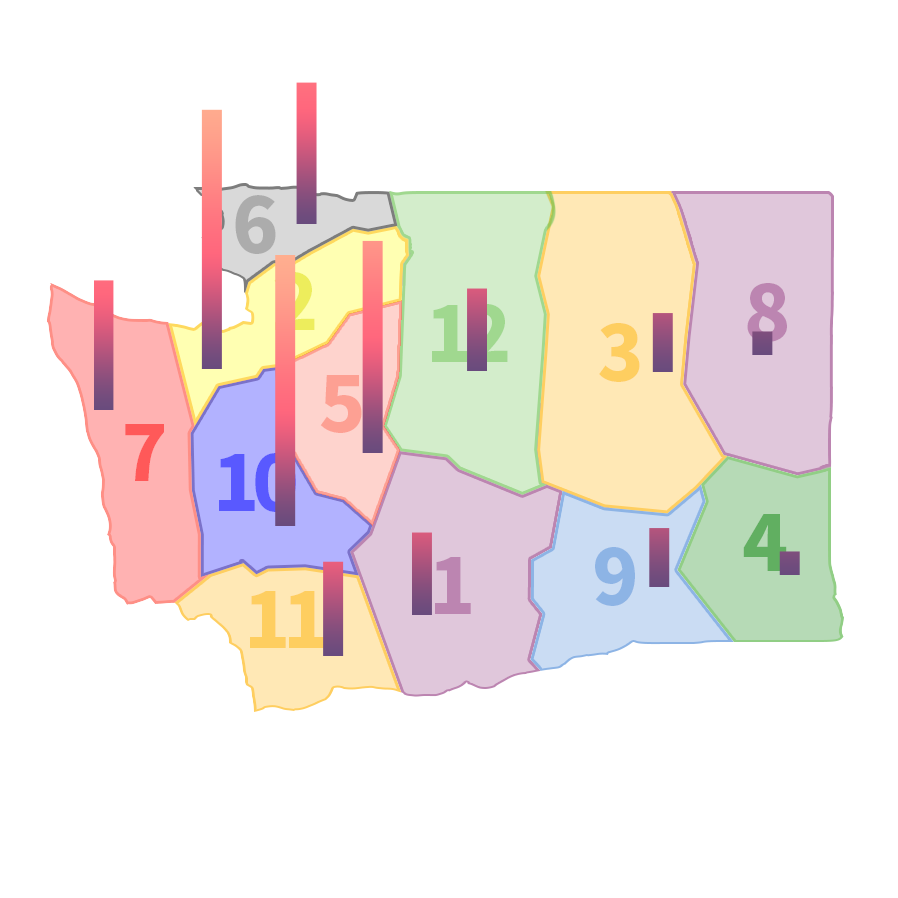
<style>
.page{position:relative;width:898px;height:898px;background:#ffffff}
.page>*{position:absolute;margin:0}
.t1{font:76.5px "SourceHanSansCN-Heavy";letter-spacing:0.05em;color:#acacac}
.t2{font:76.5px "SourceHanSansCN-Heavy";letter-spacing:0.05em}
.t3{font:76.5px "SourceHanSansCN-Heavy";letter-spacing:0.05em;color:#bc85b1}
.t4{font:76.5px "SourceHanSansCN-Heavy";letter-spacing:-0.1em;color:#a0d88f}
.t5{font:76.5px "SourceHanSansCN-Heavy";letter-spacing:0.05em;color:#fece60}
.t6{font:76.5px "SourceHanSansCN-Heavy";letter-spacing:0.05em;color:#fda093}
.t7{font:76.5px "SourceHanSansCN-Heavy";letter-spacing:0.05em;color:#ff5959}
.t8{font:76.5px "SourceHanSansCN-Heavy";letter-spacing:-0.1em;color:#5959ff}
.t9{font:76.5px "SourceHanSansCN-Heavy";letter-spacing:0.05em;color:#61af61}
.t10{font:76.5px "SourceHanSansCN-Heavy";letter-spacing:0.05em;color:#8db4e5}
.t11{font:76.5px "SourceHanSansCN-Heavy";letter-spacing:-0.1em;color:#fece60}
</style>
<div class="page">
<p class="t1" style="left:235px;top:195px;width:41px;height:59px">6</p>
<p class="t2" style="left:274px;top:272px;width:41px;height:58px">2</p>
<p class="t3" style="left:747px;top:283px;width:40px;height:59px">8</p>
<p class="t4" style="left:432px;top:304px;width:76px;height:58px">12</p>
<p class="t5" style="left:599px;top:323px;width:41px;height:59px">3</p>
<p class="t6" style="left:320px;top:375px;width:42px;height:58px">5</p>
<p class="t7" style="left:125px;top:424px;width:39px;height:57px">7</p>
<p class="t8" style="left:219px;top:453px;width:77px;height:59px">10</p>
<p class="t9" style="left:743px;top:514px;width:44px;height:57px">4</p>
<p class="t3" style="left:435px;top:557px;width:36px;height:57px">1</p>
<p class="t10" style="left:595px;top:547px;width:40px;height:59px">9</p>
<p class="t11" style="left:250px;top:591px;width:75px;height:57px">11</p>
</div>
